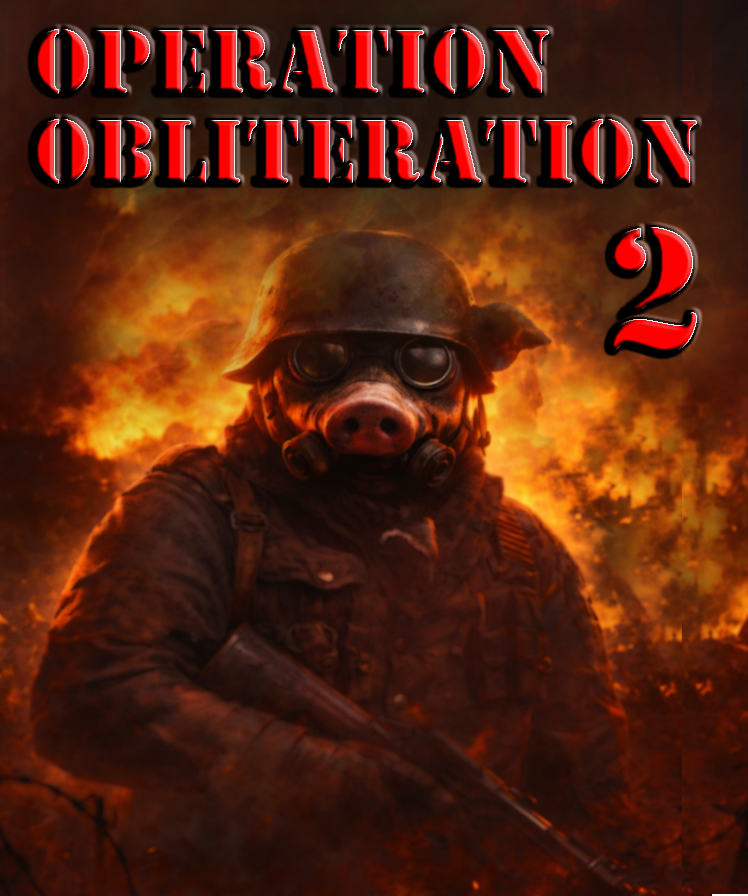
<style>
.page{position:relative;width:748px;height:896px}
.page>*{position:absolute;margin:0}
.t1{font:95px/90px "Stencil"}
.t2{font:185px "Stencil"}
</style>
<div class="page">
<p class="t1" style="left:33px;top:29px;width:664px;height:155px">Operation<br>obliteration</p>
<p class="t2" style="left:609px;top:227px;width:88px;height:127px">2</p>
</div>
